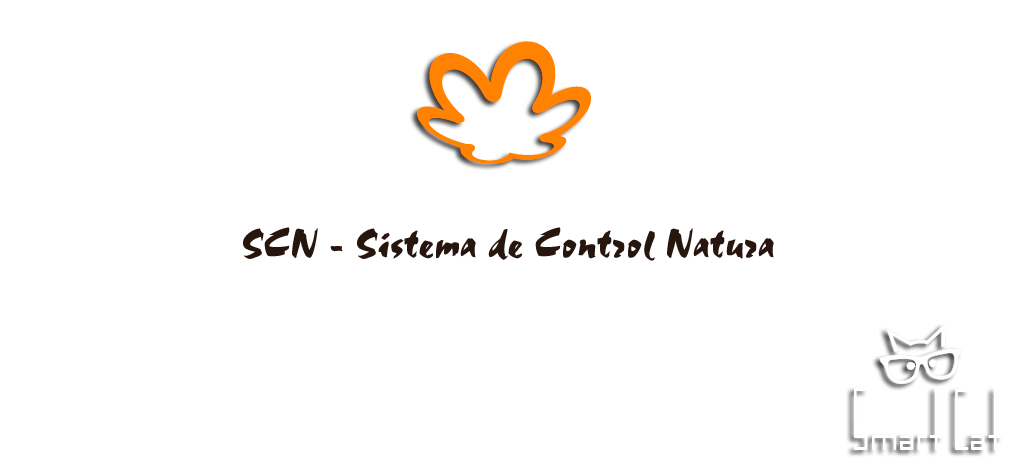
<style>
.page{position:relative;width:1024px;height:475px;background:#ffffff}
.page>*{position:absolute;margin:0}
.t1{font:44px "Stucco555";color:#27160e}
</style>
<div class="page">
<p class="t1" style="left:243px;top:227px;width:531px;height:34px">SCN - Sistema de Control Natura</p>
</div>
